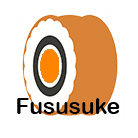
<style>
.page{position:relative;width:138px;height:138px;background:#ffffff}
.page>*{position:absolute;margin:0}
.t1{font:22.5px "ArialRoundedMTBold";color:#000000}
</style>
<div class="page">
<p class="t1" style="left:17px;top:98px;width:103px;height:16px">Fususuke</p>
</div>
